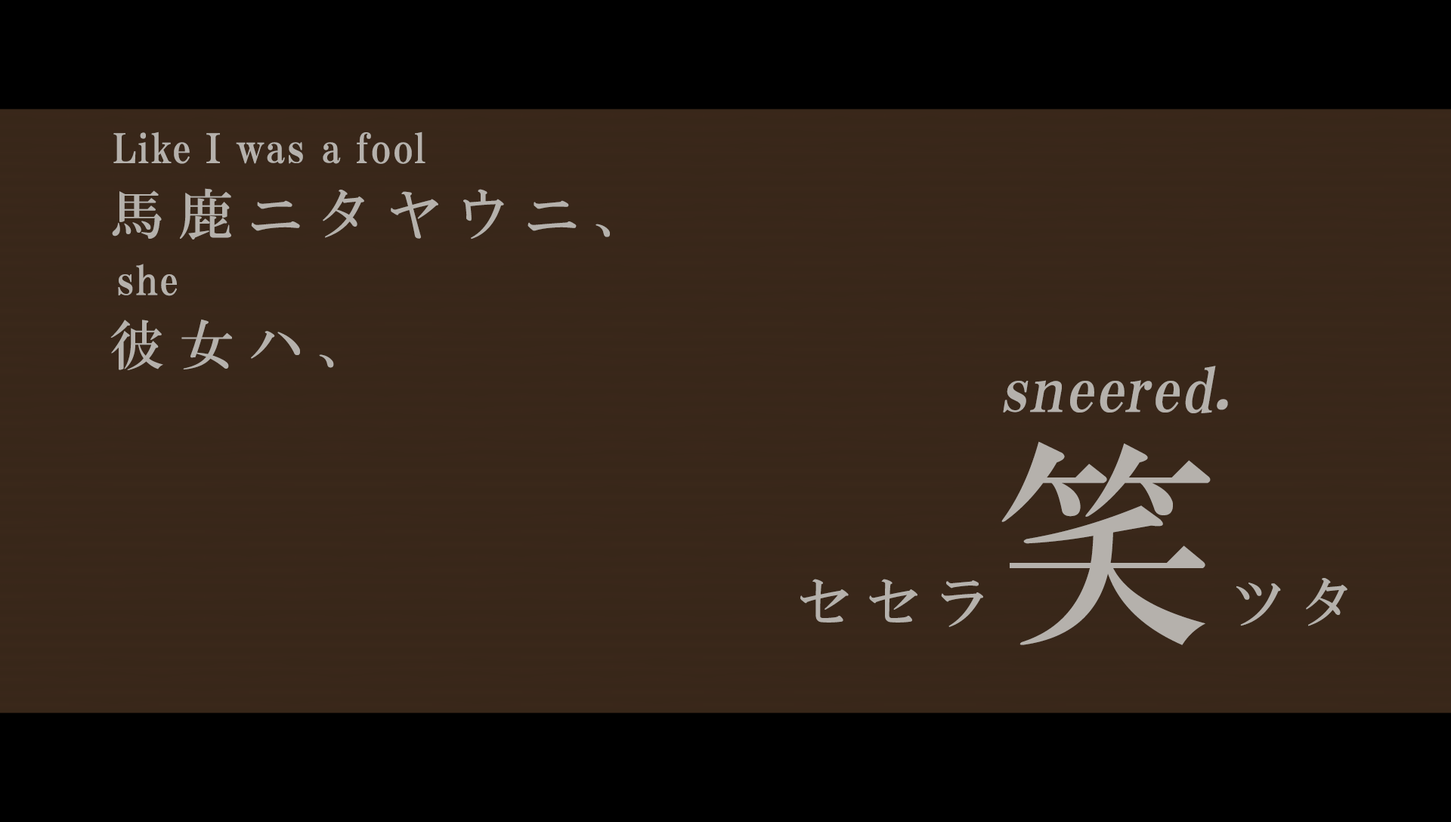
<style>
.page{position:relative;width:1451px;height:822px;background:#39271a}
.page>*{position:absolute;margin:0}
.t1{font:40.3px "HGPMinchoE";letter-spacing:0.025em;color:#b5b1ac}
.t2{font:54.4px "HGMinchoB";letter-spacing:0.27em;color:#b5b1ac}
.t3{font:60.4px "HGPMinchoE";letter-spacing:0.025em;color:#b5b1ac;font-style:italic}
.t4{font:218.3px "HGMinchoB";letter-spacing:0.29em;color:#b5b1ac}
</style>
<div class="page">
<p class="t1" style="left:113px;top:131px;width:312px;height:33px">Like I was a fool</p>
<p class="t2" style="left:110px;top:188px;width:500px;height:182px">馬鹿ニタヤウニ、<br><br>彼女ハ、</p>
<p class="t1" style="left:118px;top:264px;width:59px;height:32px">she</p>
<p class="t3" style="left:1003px;top:366px;width:225px;height:47px">sneered.</p>
<p class="t4" style="left:1001px;top:441px;width:209px;height:204px">笑</p>
<p class="t2" style="left:800px;top:578px;width:547px;height:49px">セセラ ツタ</p>
</div>
